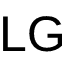
<style>
.page{position:relative;width:64px;height:64px;background:#ffffff}
.page>*{position:absolute;margin:0}
.t1{font:50px "Arimo-Regular";color:#000000}
</style>
<div class="page">
<p class="t1" style="left:3px;top:16px;width:59px;height:36px">LG</p>
</div>
